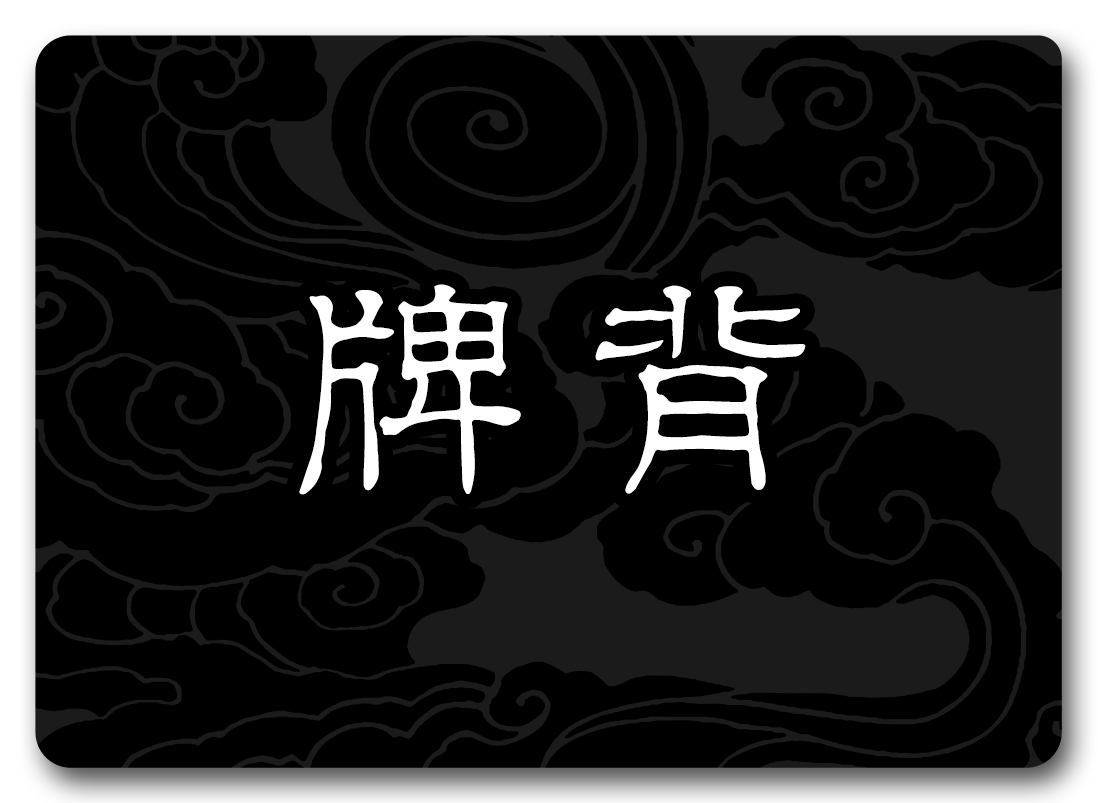
<style>
.page{position:relative;width:1098px;height:803px;background:#000000}
.page>*{position:absolute;margin:0}
.t1{font:250px "_GBK";letter-spacing:0.24em;color:#ffffff}
</style>
<div class="page">
<p class="t1" style="left:299px;top:284px;width:507px;height:211px">牌背</p>
</div>
